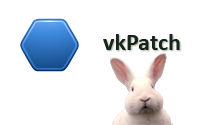
<style>
.page{position:relative;width:200px;height:125px;background:#ffffff}
.page>*{position:absolute;margin:0}
.t1{font:24px "Calibri-Bold";color:#162517}
</style>
<div class="page">
<p class="t1" style="left:103px;top:34px;width:77px;height:16px">vkPatch</p>
</div>
